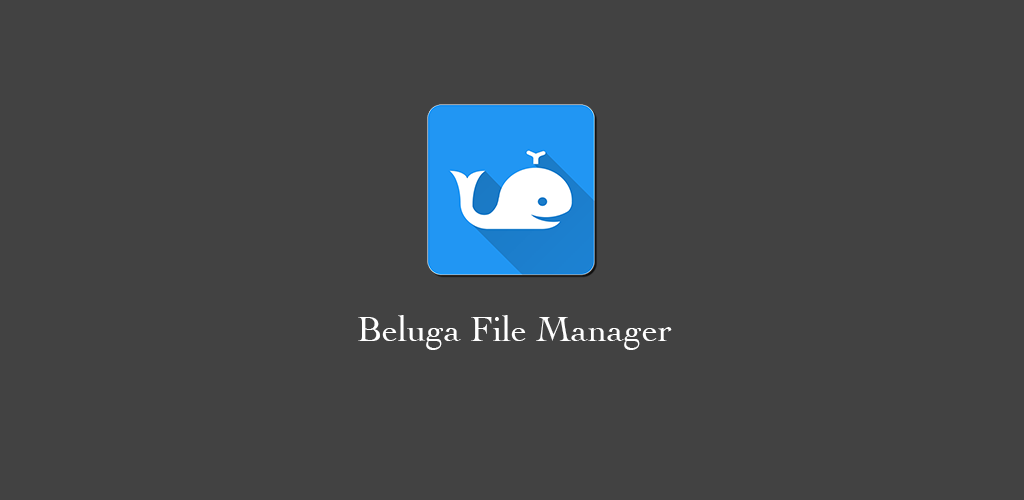
<style>
.page{position:relative;width:1024px;height:500px;background:#424242}
.page>*{position:absolute;margin:0}
.t1{font:36px "Cochin";color:#ffffff}
</style>
<div class="page">
<p class="t1" style="left:358px;top:315px;width:314px;height:35px">Beluga File Manager</p>
</div>
